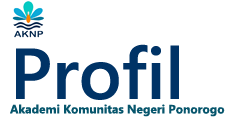
<style>
.page{position:relative;width:245px;height:140px;background:#ffffff}
.page>*{position:absolute;margin:0}
.t1{font:12px "SegoeUI-Bold";color:#06556c}
.t2{font:72px "SegoeUI-Semibold";color:#003366}
</style>
<div class="page">
<p class="t1" style="left:10px;top:44px;width:215px;height:73px"><span class="t2">Profil<br></span>Akademi Komunitas Negeri Ponorogo</p>
</div>
